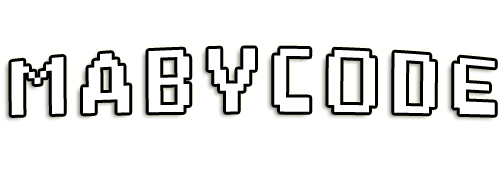
<style>
.page{position:relative;width:500px;height:181px;background:#ffffff}
.page>*{position:absolute;margin:0}
.t1{font:185.6px "Game-Over";letter-spacing:0.075em;color:#ffffff}
</style>
<div class="page">
<p class="t1" style="left:11px;top:48px;width:484px;height:67px">MABYCODE</p>
</div>
